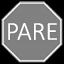
<style>
.page{position:relative;width:64px;height:64px;background:#808080}
.page>*{position:absolute;margin:0}
.t1{font:26px "Calibri-Light";color:#ffffff}
</style>
<div class="page">
<p class="t1" style="left:8px;top:23px;width:49px;height:17px">PARE</p>
</div>
